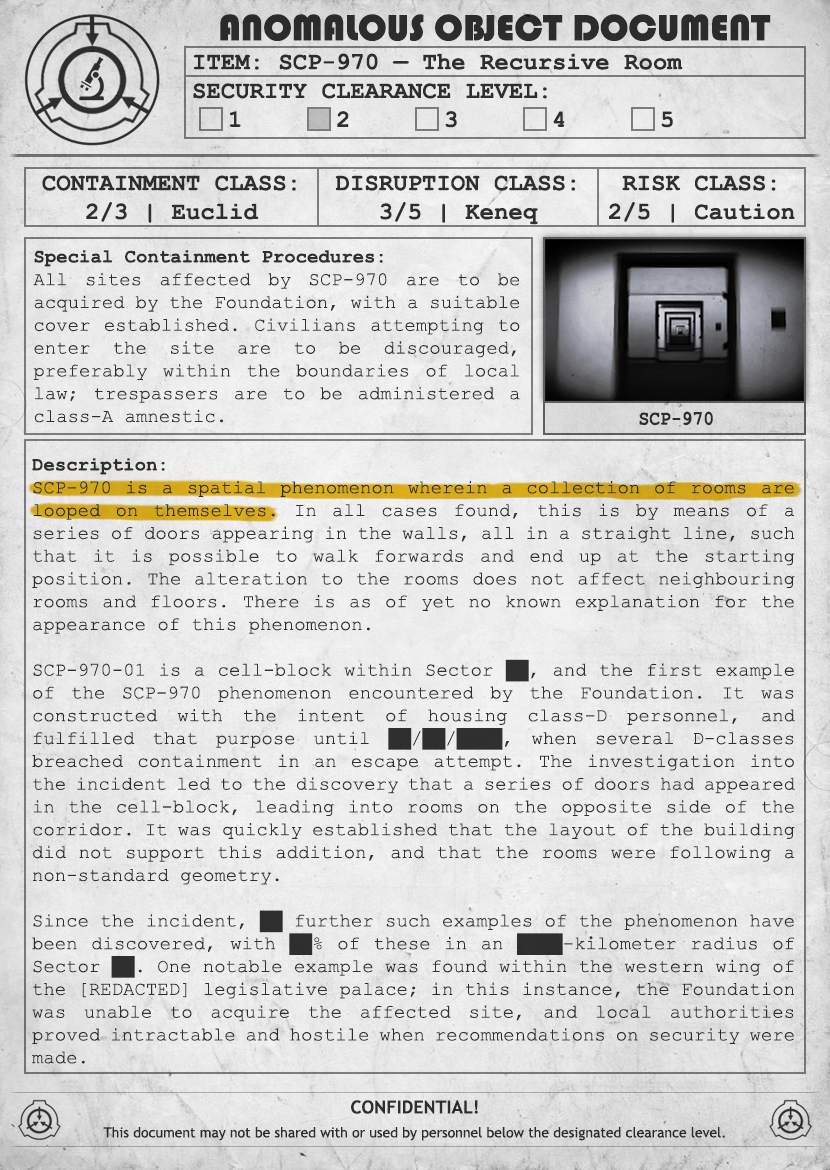
<style>
.page{position:relative;width:830px;height:1170px}
.page>*{position:absolute;margin:0}
.t1{font:38px "Bauhaus93";color:#333333;text-transform:uppercase}
.t2{font:24px "CourierNewPS-BoldMT";color:#333333}
.t3{font:24px "CourierNewPS-BoldMT";color:#333333;text-transform:uppercase}
.t4{font:19px "CourierNewPSMT";color:#333333}
.t5{font:19px "CourierNewPS-BoldMT";color:#333333}
.t6{font:20.1px "CourierNewPS-BoldMT";color:#333333;scale:0.9 1}
.t7{font:14px/24px "TrebuchetMS";color:#333333}
.t8{font:18px/24px "TrebuchetMS-Bold";color:#333333}
</style>
<div class="page">
<p class="t1" style="left:220px;top:14px;width:551px;height:27px">anomalous object document</p>
<p class="t2" style="left:193px;top:53px;width:490px;height:75px">ITEM: SCP-970 — The Recursive Room<br><span class="t3">Security CLEARANCE LEVEL:</span> <br> 1   2   3   4   5</p>
<p class="t2" style="left:42px;top:175px;width:254px;height:48px;text-align:center">CONTAINMENT CLASS:<br>2/3 | Euclid</p>
<p class="t2" style="left:335px;top:175px;width:241px;height:50px;text-align:center">DISRUPTION CLASS:<br>3/5 | Keneq</p>
<p class="t2" style="left:609px;top:175px;width:186px;height:48px;text-align:center">RISK CLASS:<br>2/5 | Caution</p>
<p class="t4" style="left:33px;top:250px;width:487px;height:173px;text-align:justify"><span class="t5">Special Containment Procedures:<br></span>All sites affected by SCP-970 are to be acquired by the Foundation, with a suitable cover established. Civilians attempting to enter the site are to be discouraged, preferably within the boundaries of local law; trespassers are to be administered a class-A amnestic.</p>
<p class="t6" style="left:639px;top:411px;width:74px;height:15px">SCP-970</p>
<p class="t4" style="left:32px;top:458px;width:763px;height:606px;text-align:justify"><span class="t5">Description:<br></span>SCP-970 is a spatial phenomenon wherein a collection of rooms are looped on themselves. In all cases found, this is by means of a series of doors appearing in the walls, all in a straight line, such that it is possible to walk forwards and end up at the starting position. The alteration to the rooms does not affect neighbouring rooms and floors. There is as of yet no known explanation for the appearance of this phenomenon.<br><br>SCP-970-01 is a cell-block within Sector ██, and the first example of the SCP-970 phenomenon encountered by the Foundation. It was constructed with the intent of housing class-D personnel, and fulfilled that purpose until ██/██/████, when several D-classes breached containment in an escape attempt. The investigation into the incident led to the discovery that a series of doors had appeared in the cell-block, leading into rooms on the opposite side of the corridor. It was quickly established that the layout of the building did not support this addition, and that the rooms were following a non-standard geometry.<br><br>Since the incident, ██ further such examples of the phenomenon have been discovered, with ██% of these in an ████-kilometer radius of Sector ██. One notable example was found within the western wing of the [REDACTED] legislative palace; in this instance, the Foundation was unable to acquire the affected site, and local authorities proved intractable and hostile when recommendations on security were made.</p>
<p class="t7" style="left:103px;top:1100px;width:622px;height:41px;text-align:center"><span class="t8">CONFIDENTIAL!<br></span>This document may not be shared with or used by personnel below the designated clearance level.</p>
</div>
